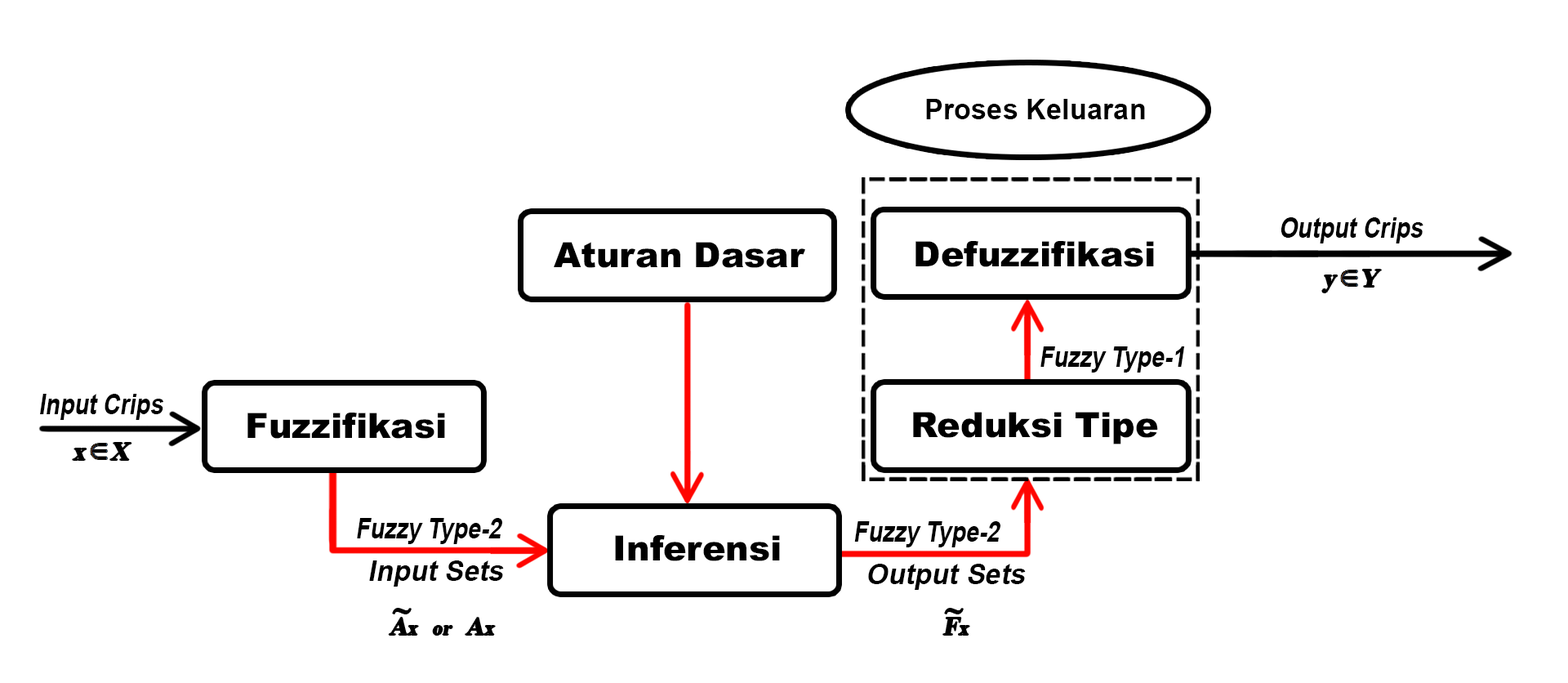
<style>
.page{position:relative;width:1568px;height:683px;background:#ffffff}
.page>*{position:absolute;margin:0}
.t1{font:28px "Arial-BoldMT";color:#000000}
.t2{font:28px "Arial-BoldMT";color:#000000;font-style:italic;scale:0.84 1}
.t3{font:34.9px "Arial-Black";color:#000000}
.t4{font:25.1px "TimesNewRomanPS-BoldMT";color:#000000;font-style:italic}
.t5{font:28px "Arial-BoldMT";color:#000000;font-style:italic}
.t6{font:19.8px "TimesNewRomanPS-BoldMT";color:#000000;font-style:italic}
.t7{font:30.6px "TimesNewRomanPS-BoldMT";color:#000000;font-style:italic}
</style>
<div class="page">
<p class="t1" style="left:926px;top:99px;width:219px;height:20px">Proses Keluaran</p>
<p class="t2" style="left:1281px;top:217px;width:142px;height:26px">Output Crips</p>
<p class="t3" style="left:554px;top:242px;width:251px;height:26px">Aturan Dasar</p>
<p class="t3" style="left:915px;top:241px;width:239px;height:26px">Defuzzifikasi</p>
<p class="t4" style="left:1322px;top:270px;width:59px;height:22px">y    Y</p>
<p class="t2" style="left:1040px;top:346px;width:145px;height:26px">Fuzzy Type-1</p>
<p class="t2" style="left:40px;top:394px;width:123px;height:26px">Input Crips</p>
<p class="t3" style="left:247px;top:412px;width:198px;height:27px">Fuzzifikasi</p>
<p class="t3" style="left:913px;top:412px;width:245px;height:32px">Reduksi Tipe</p>
<p class="t4" style="left:73px;top:443px;width:58px;height:17px">x    X</p>
<p class="t2" style="left:357px;top:518px;width:145px;height:26px">Fuzzy Type-2</p>
<p class="t2" style="left:854px;top:521px;width:146px;height:26px">Fuzzy Type-2</p>
<p class="t3" style="left:615px;top:535px;width:165px;height:26px">Inferensi</p>
<p class="t5" style="left:369px;top:560px;width:135px;height:26px">Input Sets</p>
<p class="t5" style="left:868px;top:564px;width:158px;height:26px">Output Sets</p>
<p class="t6" style="left:389px;top:617px;width:106px;height:18px"><span class="t4">A</span>x   or   <span class="t4">A</span>x</p>
<p class="t7" style="left:393px;top:608px;width:18px;height:5px">~</p>
<p class="t4" style="left:943px;top:617px;width:26px;height:18px">F<span class="t6">x</span></p>
<p class="t7" style="left:945px;top:608px;width:18px;height:5px">~</p>
</div>
